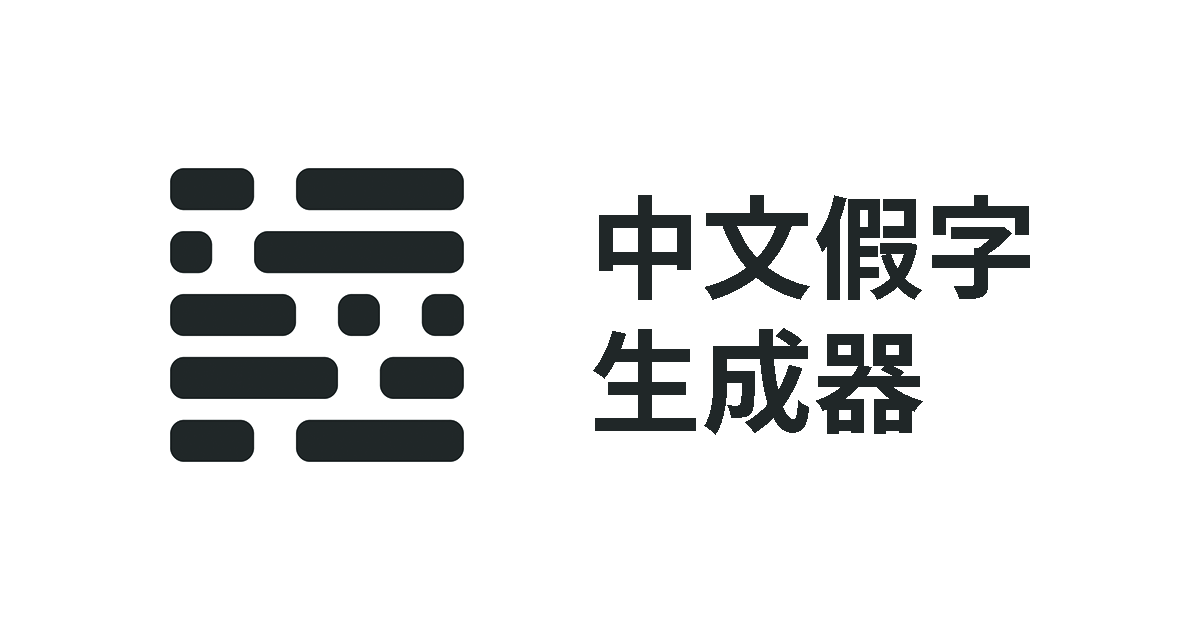
<style>
.page{position:relative;width:1200px;height:630px;background:#ffffff}
.page>*{position:absolute;margin:0}
.t1{font:112px "GenYoGothicTW-Bold-TTF";color:#202728}
</style>
<div class="page">
<p class="t1" style="left:593px;top:195px;width:437px;height:240px">中文假字<br>生成器</p>
</div>
